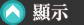
<style>
.page{position:relative;width:84px;height:25px;background:#333333}
.page>*{position:absolute;margin:0}
.t1{font:18px "RyuminPr6N-ExBold";color:#f7f6f6}
</style>
<div class="page">
<p class="t1" style="left:33px;top:3px;width:35px;height:18px">顯示</p>
</div>
